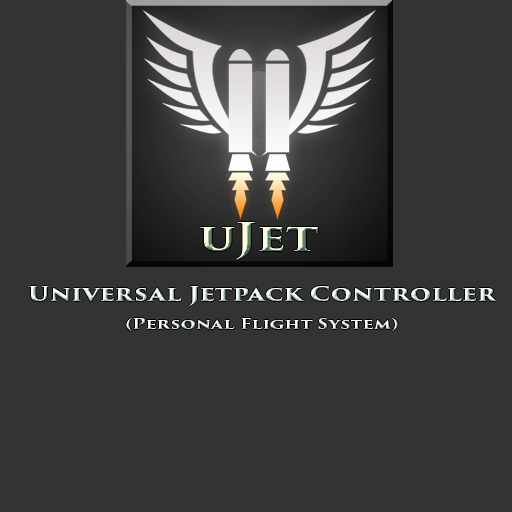
<style>
.page{position:relative;width:512px;height:512px;background:#333333}
.page>*{position:absolute;margin:0}
.t1{font:37.3px "TrajanPro3-Bold";scale:1.29 1}
.t2{font:19.6px "TrajanPro3-Bold";scale:1.29 1}
.t3{font:42px "TrajanPro3-Bold";scale:1.29 1}
.t4{font:14px "TrajanPro3-Bold";scale:1.29 1}
</style>
<div class="page">
<p class="t1" style="left:200px;top:222px;width:118px;height:38px">uJet</p>
<p class="t2" style="left:28px;top:286px;width:470px;height:45px;text-align:center"><span class="t3"><br></span><br>Universal Jetpack Controller<br><br><span class="t4">(Personal Flight System)</span></p>
</div>
